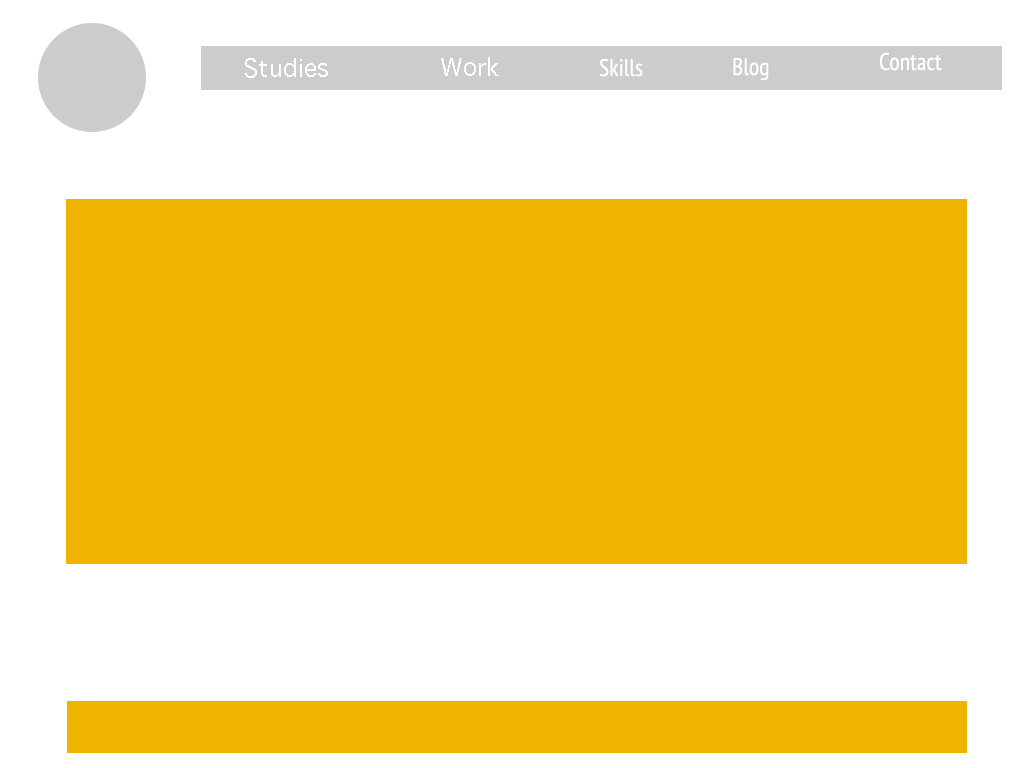
<style>
.page{position:relative;width:1024px;height:768px;background:#efb400}
.page>*{position:absolute;margin:0}
.t1{font:24px "PTSans-Narrow";color:#ffffff}
.t2{font:24px "Sathu";color:#ffffff}
</style>
<div class="page">
<p class="t1" style="left:880px;top:52px;width:62px;height:19px">Contact</p>
<p class="t2" style="left:245px;top:58px;width:83px;height:20px">Studies</p>
<p class="t2" style="left:441px;top:57px;width:58px;height:19px">Work</p>
<p class="t1" style="left:599px;top:58px;width:44px;height:19px">Skills</p>
<p class="t1" style="left:733px;top:58px;width:36px;height:23px">Blog</p>
</div>
